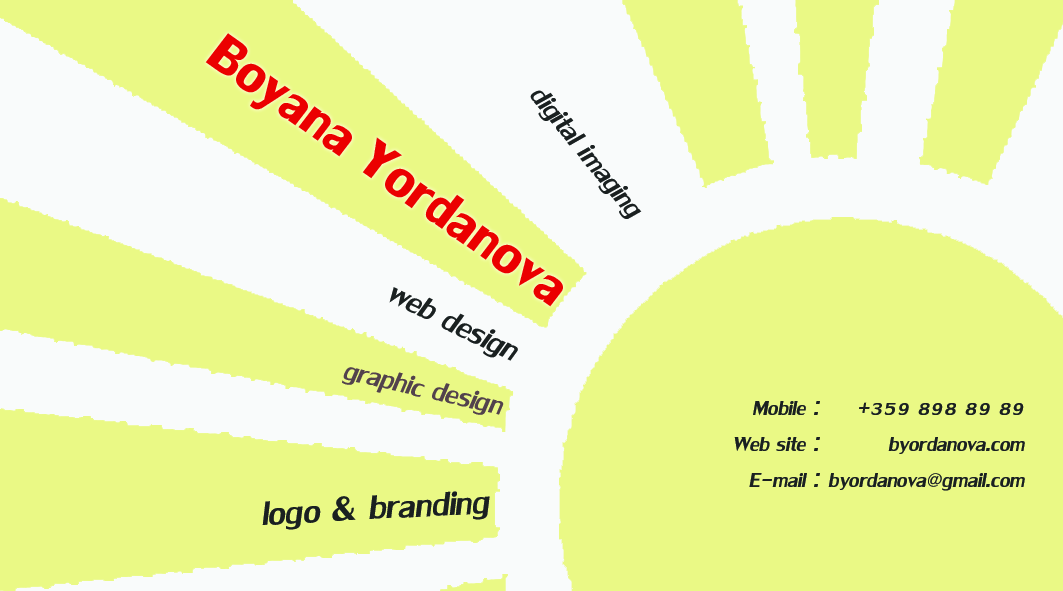
<style>
.page{position:relative;width:1063px;height:591px;background:#eaf985}
.page>*{position:absolute;margin:0}
.t1{font:78px "LilyUPCBold";color:#eb0000;scale:0.9 1}
.t2{font:40px "LilyUPCItalic";color:#1a2020}
.t3{font:45px "LilyUPCItalic";color:#1a2020}
.t4{font:40px "LilyUPCItalic";color:#52414c}
.t5{font:30px "LilyUPCItalic";color:#1a2020}
.t6{font:50px "LilyUPCItalic";color:#1a2020}
</style>
<div class="page">
<p class="t1" style="left:205px;top:33px;width:358px;height:274px;rotate:35deg">Boyana Yordanova</p>
<p class="t2" style="left:530px;top:90px;width:112px;height:129px;rotate:51deg">digital imaging</p>
<p class="t3" style="left:389px;top:287px;width:129px;height:74px;rotate:26deg">web design</p>
<p class="t4" style="left:342px;top:367px;width:162px;height:48px;rotate:13deg">graphic design</p>
<p class="t5" style="left:734px;top:401px;width:86px;height:86px;text-align:justify">Mobile :<br>Web site :<br>E-mail :</p>
<p class="t5" style="left:828px;top:402px;width:197px;height:89px;text-align:justify">+359 898 89 89<br> byordanova.com<br> byordanova@gmail.com</p>
<p class="t6" style="left:262px;top:491px;width:228px;height:39px;rotate:-3deg">logo &amp; branding</p>
</div>
